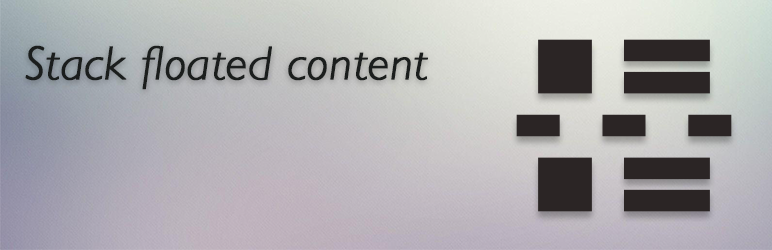
<style>
.page{position:relative;width:772px;height:250px}
.page>*{position:absolute;margin:0}
.t1{font:48px "GillSans-LightItalic";color:#1b1e1d;font-weight:bold}
</style>
<div class="page">
<p class="t1" style="left:25px;top:45px;width:403px;height:45px">Stack floated content</p>
</div>
